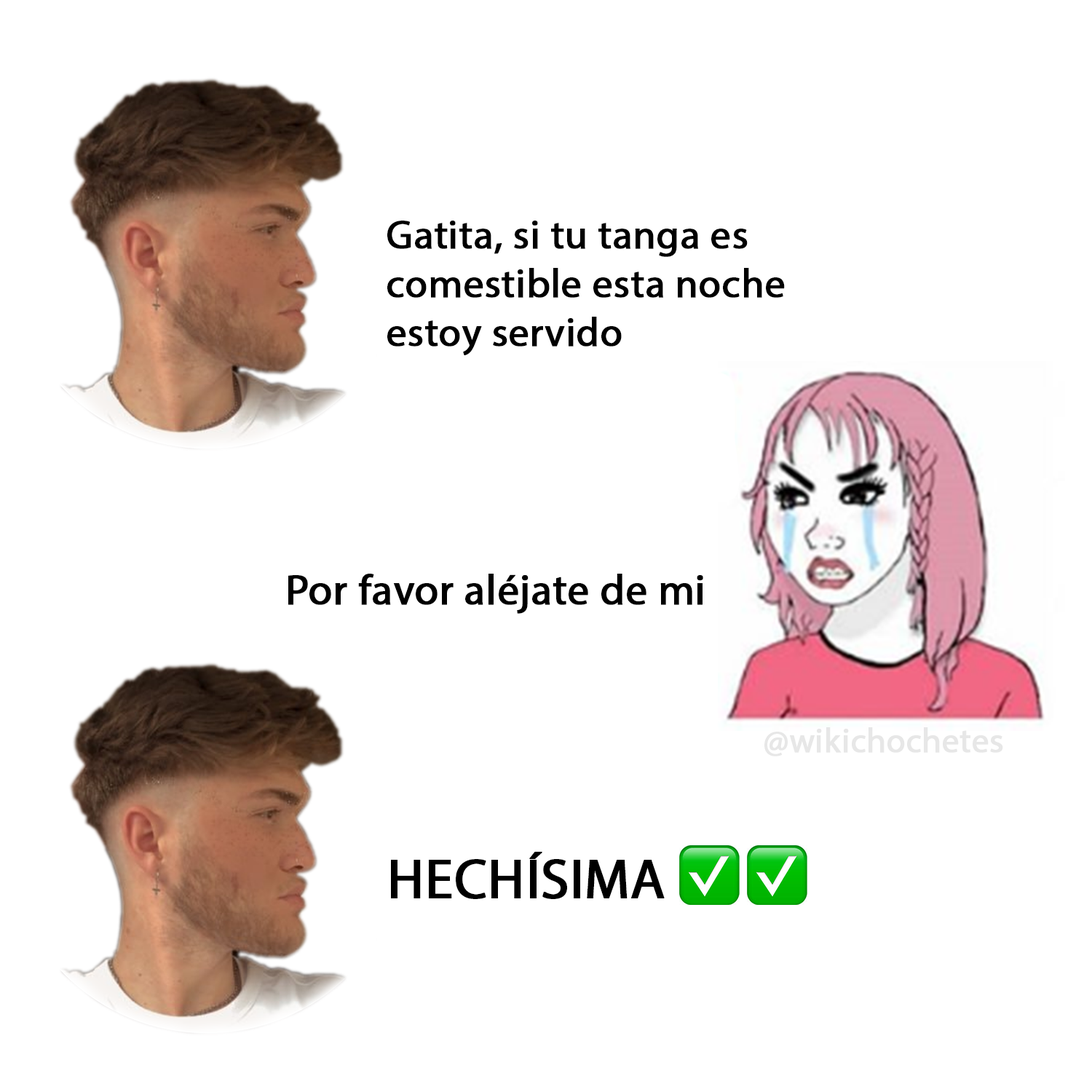
<style>
.page{position:relative;width:1092px;height:1092px;background:#ffffff}
.page>*{position:absolute;margin:0}
.t1{font:40.4px "MyriadPro-Regular";color:#000000;font-weight:bold}
.t2{font:42.6px "MyriadPro-Regular";color:#000000;font-weight:bold}
.t3{font:34px "MyriadPro-Regular";color:#e7e7e7;font-weight:bold}
.t4{font:55.8px "MyriadPro-Regular";color:#000000;font-weight:bold}
</style>
<div class="page">
<p class="t1" style="left:387px;top:221px;width:398px;height:134px">Gatita, si tu tanga es<br>comestible esta noche<br>estoy servido</p>
<p class="t2" style="left:288px;top:574px;width:415px;height:40px">Por favor aléjate de mi</p>
<p class="t3" style="left:764px;top:727px;width:239px;height:29px">@wikichochetes</p>
<p class="t4" style="left:391px;top:852px;width:274px;height:47px">HECHÍSIMA</p>
</div>
